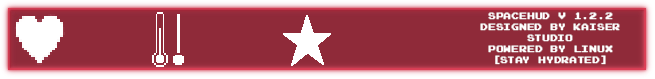
<style>
.page{position:relative;width:655px;height:79px;background:#8f2a39}
.page>*{position:absolute;margin:0}
.t1{font:9.2px "JoystixMonospace-Regular";letter-spacing:-0.005em;color:#ffffff;font-weight:bold}
</style>
<div class="page">
<p class="t1" style="left:480px;top:12px;width:140px;height:53px;text-align:center">SPACEHUD V 1.2.2<br>designed by Kaiser Studio<br>powered by Linux<br>[stay hydrated]</p>
</div>
